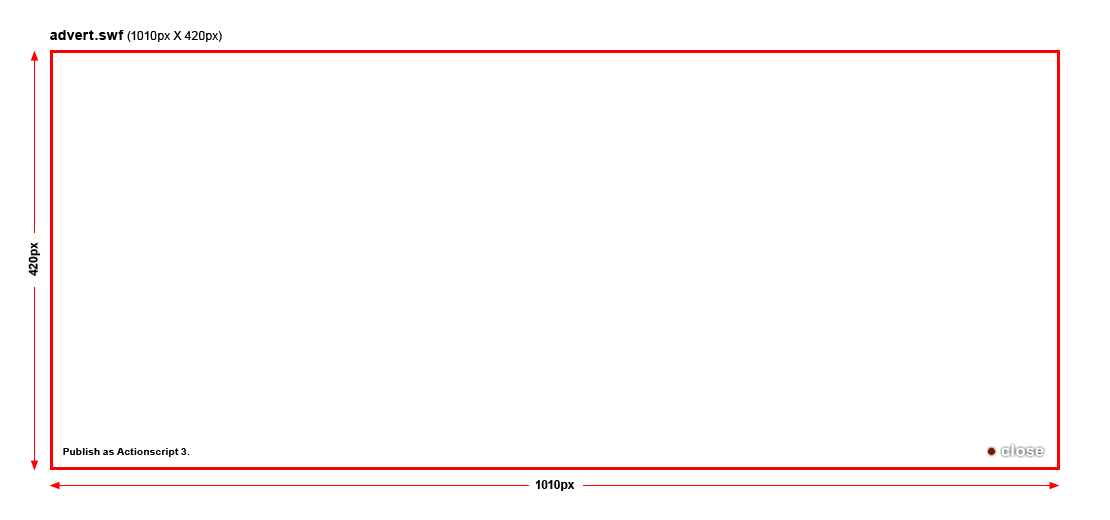
<style>
.page{position:relative;width:1110px;height:520px;background:#ffffff}
.page>*{position:absolute;margin:0}
.t1{font:12px "ArialMT";color:#000000}
.t2{font:14px "Arial-BoldMT";color:#000000}
.t3{font:12px "Arial-BoldMT";color:#000000}
.t4{font:10px "Arial-BoldMT";color:#000000}
</style>
<div class="page">
<p class="t1" style="left:50px;top:30px;width:172px;height:12px"><span class="t2">advert.swf </span>(1010px X 420px)</p>
<p class="t3" style="left:28px;top:242px;width:13px;height:34px;rotate:-90deg">420px</p>
<p class="t4" style="left:63px;top:448px;width:127px;height:9px">Publish as Actionscript 3.</p>
<p class="t3" style="left:535px;top:480px;width:40px;height:11px">1010px</p>
</div>
